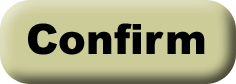
<style>
.page{position:relative;width:236px;height:84px;background:#cccc99}
.page>*{position:absolute;margin:0}
.t1{font:41.7px "Arial-Black";color:#000000}
</style>
<div class="page">
<p class="t1" style="left:28px;top:23px;width:177px;height:32px">Confirm</p>
</div>
